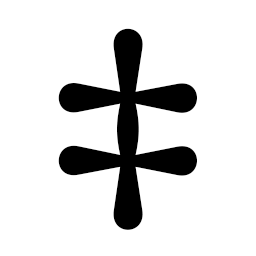
<style>
.page{position:relative;width:256px;height:256px;background:#ffffff}
.page>*{position:absolute;margin:0}
.t1{font:395px "ReviewMonoRegular";color:#000000}
</style>
<div class="page">
<p class="t1" style="left:58px;top:28px;width:139px;height:202px">‡</p>
</div>
